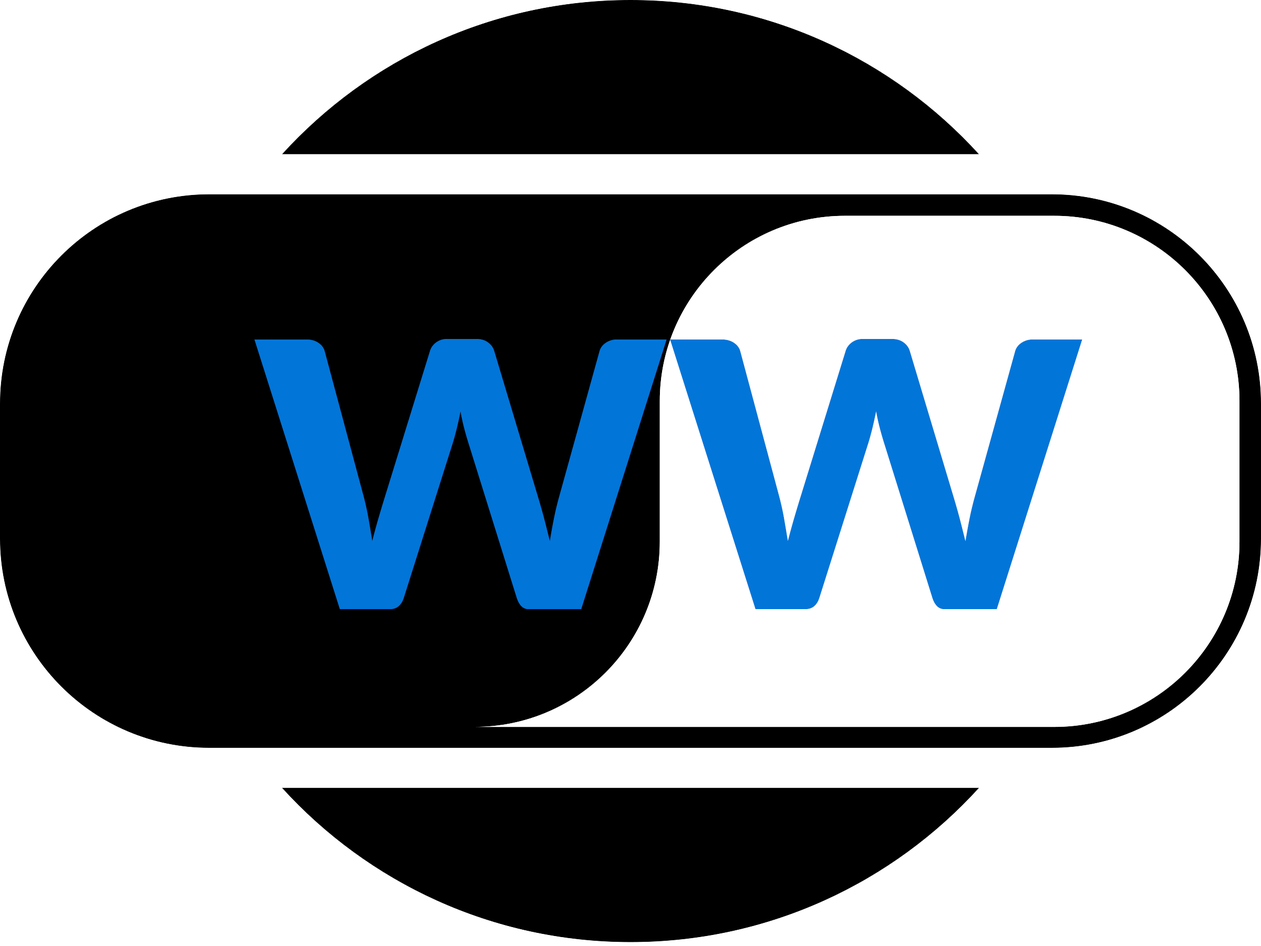
<style>
.page{position:relative;width:1261px;height:946px;background:#ffffff}
.page>*{position:absolute;margin:0}
.t1{font:525.4px "Lato-Bold";color:#0275d8}
</style>
<div class="page">
<p class="t1" style="left:254px;top:339px;width:828px;height:270px">ww</p>
</div>
